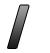
<style>
.page{position:relative;width:50px;height:53px;background:#ffffff}
.page>*{position:absolute;margin:0}
.t1{font:51.3px "Impact";letter-spacing:0.075em;font-weight:bold}
</style>
<div class="page">
<p class="t1" style="left:8px;top:5px;width:21px;height:43px">/</p>
</div>
